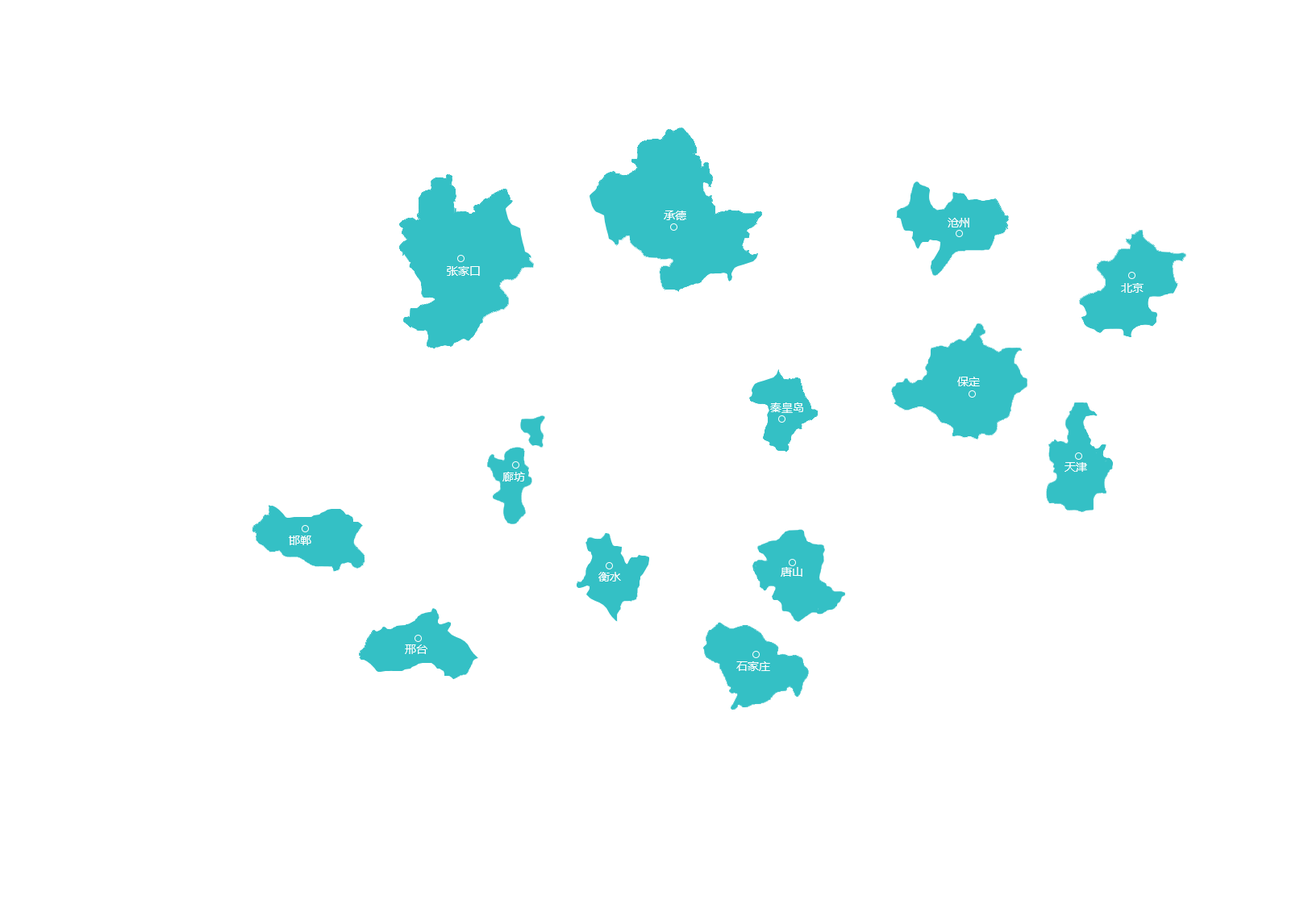
<style>
.page{position:relative;width:1300px;height:917px;background:#ffffff}
.page>*{position:absolute;margin:0}
.t1{font:11.3px "MicrosoftYaHei";color:#ffffff}
</style>
<div class="page">
<p class="t1" style="left:664px;top:211px;width:22px;height:9px">承德</p>
<p class="t1" style="left:948px;top:218px;width:22px;height:9px">沧州</p>
<p class="t1" style="left:447px;top:266px;width:33px;height:10px">张家口</p>
<p class="t1" style="left:1121px;top:283px;width:23px;height:10px">北京</p>
<p class="t1" style="left:957px;top:377px;width:23px;height:9px">保定</p>
<p class="t1" style="left:770px;top:402px;width:33px;height:11px">秦皇岛</p>
<p class="t1" style="left:503px;top:472px;width:22px;height:10px">廊坊</p>
<p class="t1" style="left:1065px;top:462px;width:22px;height:10px">天津</p>
<p class="t1" style="left:289px;top:536px;width:22px;height:9px">邯郸</p>
<p class="t1" style="left:781px;top:567px;width:22px;height:10px">唐山</p>
<p class="t1" style="left:598px;top:572px;width:23px;height:10px">衡水</p>
<p class="t1" style="left:405px;top:644px;width:22px;height:10px">邢台</p>
<p class="t1" style="left:736px;top:661px;width:34px;height:10px">石家庄</p>
</div>
